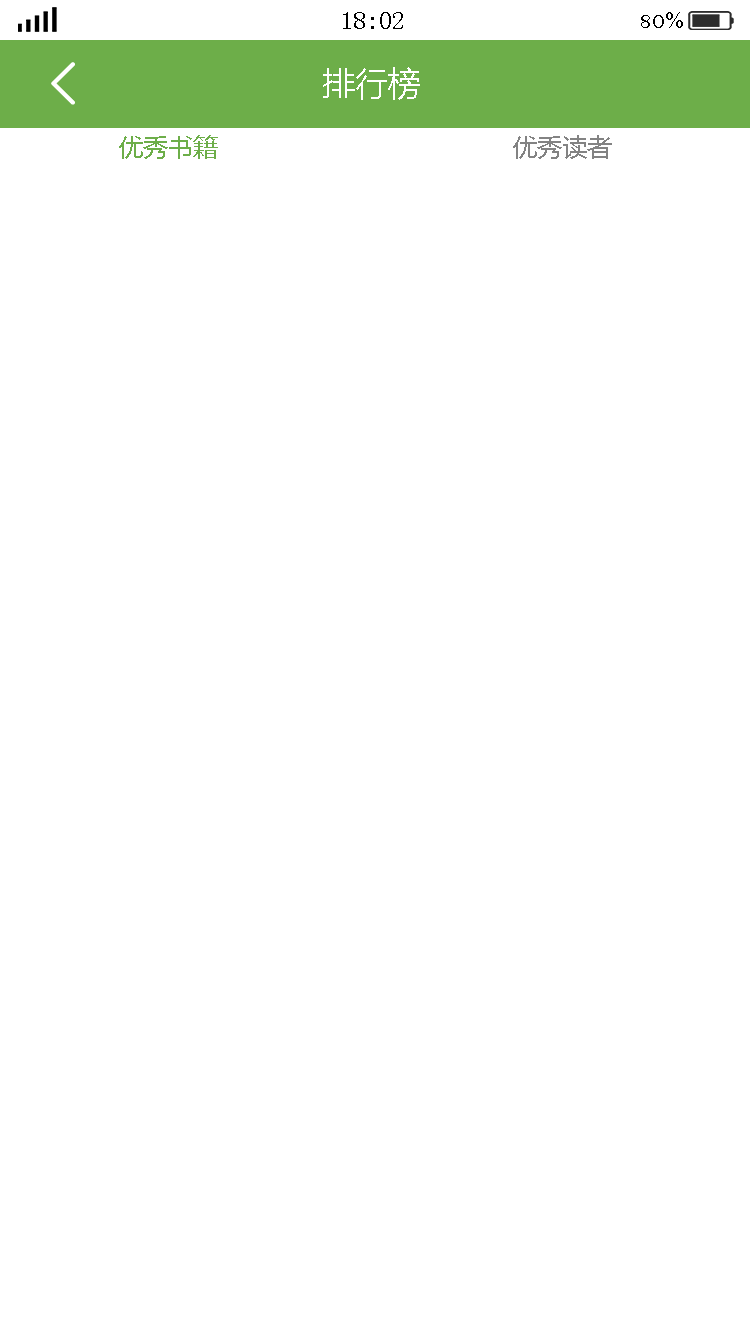
<style>
.page{position:relative;width:750px;height:1334px;background:#ffffff}
.page>*{position:absolute;margin:0}
.t1{font:25px "SimSun";color:#000000}
.t2{font:25px "BellMT";color:#000000}
.t3{font:33.3px "MicrosoftYaHei";color:#ffffff}
.t4{font:25px "MicrosoftYaHei";color:#6dae49}
.t5{font:25px "MicrosoftYaHei";color:#838383}
</style>
<div class="page">
<p class="t1" style="left:343px;top:12px;width:60px;height:17px">18:02</p>
<p class="t2" style="left:641px;top:12px;width:42px;height:16px">80%</p>
<p class="t3" style="left:323px;top:67px;width:97px;height:33px">排行榜</p>
<p class="t4" style="left:119px;top:135px;width:99px;height:24px">优秀书籍</p>
<p class="t5" style="left:513px;top:135px;width:99px;height:24px">优秀读者</p>
</div>
